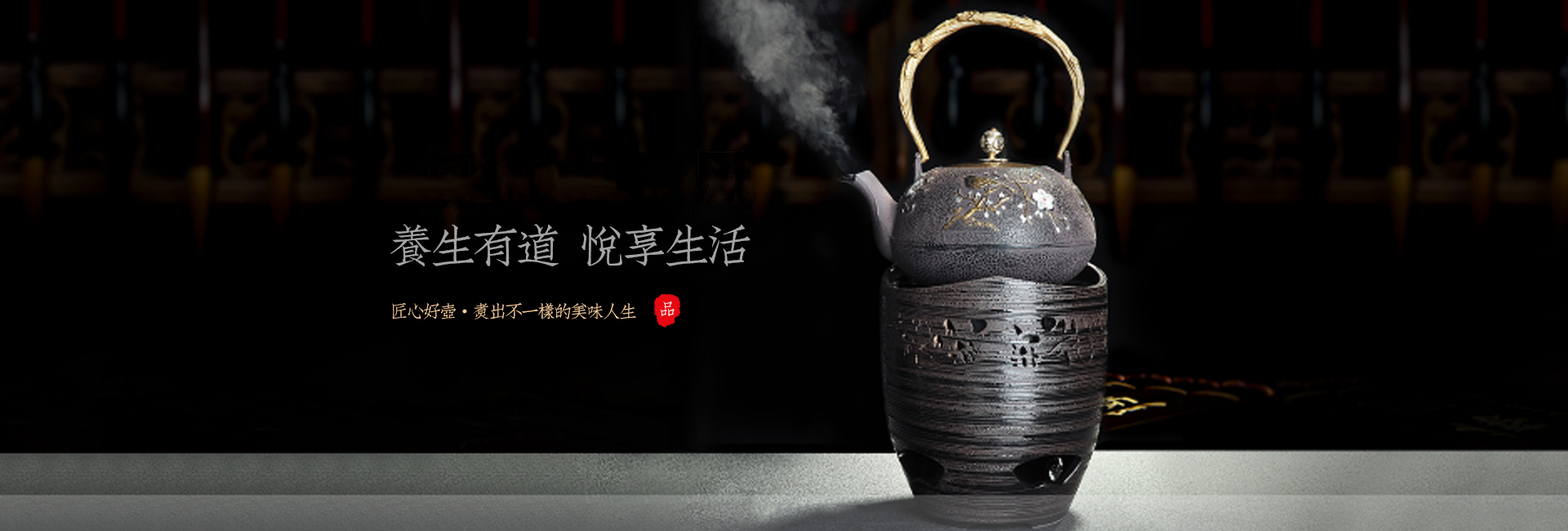
<style>
.page{position:relative;width:1568px;height:531px;background:#000000}
.page>*{position:absolute;margin:0}
.t1{font:42.5px "Wyue-GutiFangsong-NC";color:#a4a4a4}
.t2{font:16.3px "Wyue-GutiFangsong-NC";color:#f9cea0;text-transform:uppercase}
.t3{font:16.3px "SimSun";color:#f9cea0;text-transform:uppercase}
.t4{font:15.5px "Wyue-GutiFangsong-NC";color:#ffffff;text-transform:uppercase}
</style>
<div class="page">
<p class="t1" style="left:390px;top:224px;width:361px;height:42px">养生有道 悦享生活</p>
<p class="t2" style="left:392px;top:302px;width:244px;height:17px">匠心好壶<span class="t3">·</span>煮出不一样的美味人生</p>
<p class="t4" style="left:660px;top:301px;width:15px;height:15px">品</p>
</div>
